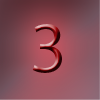
<style>
.page{position:relative;width:100px;height:100px}
.page>*{position:absolute;margin:0}
.t1{font:72px "MyriadPro-Regular"}
</style>
<div class="page">
<p class="t1" style="left:32px;top:24px;width:30px;height:49px">3</p>
</div>
